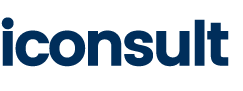
<style>
.page{position:relative;width:243px;height:91px;background:#ffffff}
.page>*{position:absolute;margin:0}
.t1{font:60px "Poppins-SemiBold";letter-spacing:-0.065em;color:#002e5b;font-weight:bold}
</style>
<div class="page">
<p class="t1" style="left:1px;top:17px;width:228px;height:50px">iconsult</p>
</div>
